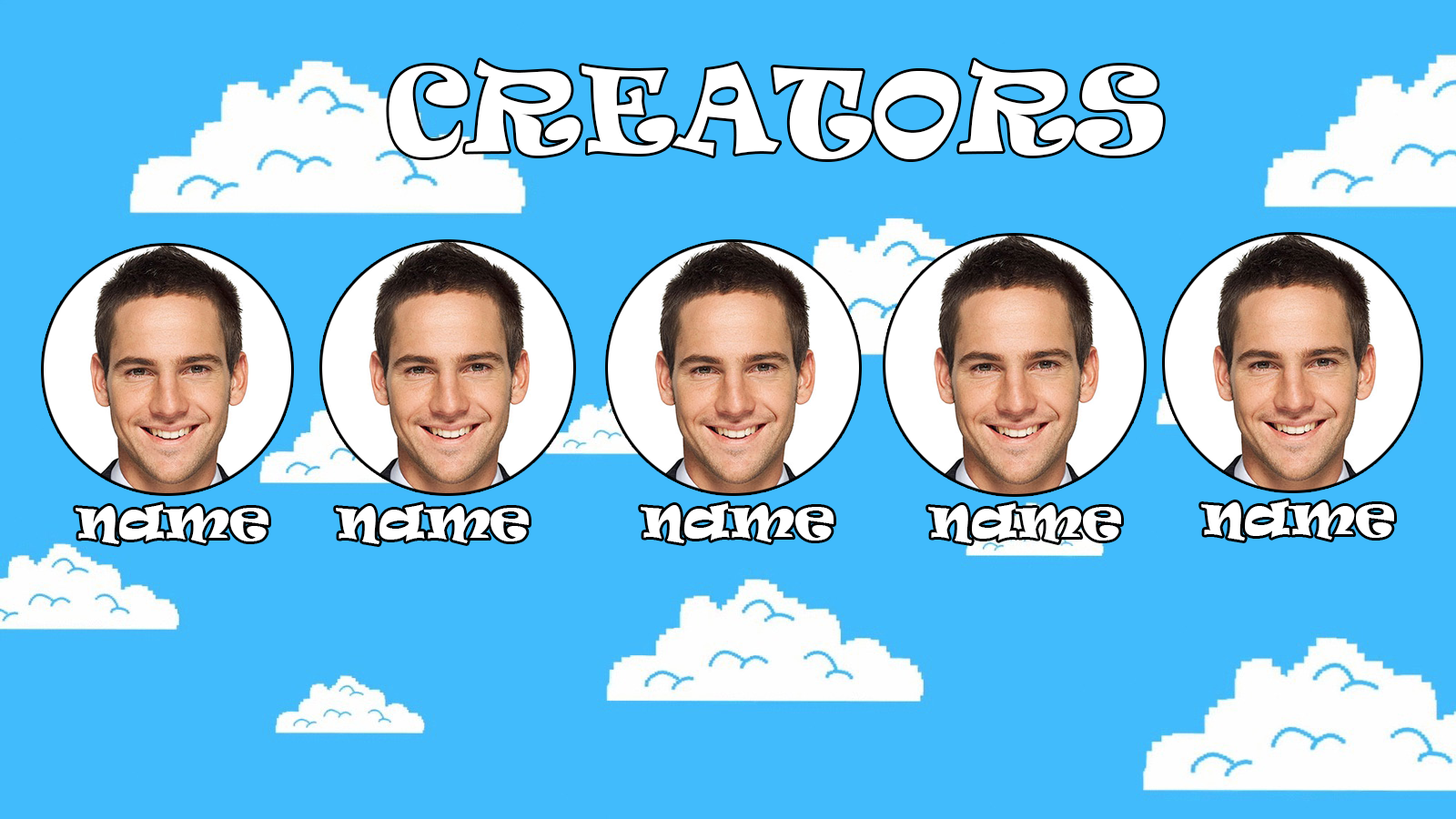
<style>
.page{position:relative;width:1456px;height:819px;background:#41bbfc}
.page>*{position:absolute;margin:0}
.t1{font:109.2px "Ravie";color:#ffffff}
.t2{font:54.6px "Ravie";color:#ffffff}
</style>
<div class="page">
<p class="t1" style="left:389px;top:60px;width:774px;height:99px">CREATORS</p>
<p class="t2" style="left:76px;top:504px;width:192px;height:40px">name</p>
<p class="t2" style="left:336px;top:504px;width:193px;height:40px">name</p>
<p class="t2" style="left:641px;top:503px;width:193px;height:40px">name</p>
<p class="t2" style="left:928px;top:503px;width:193px;height:40px">name</p>
<p class="t2" style="left:1201px;top:500px;width:193px;height:41px">name</p>
</div>
